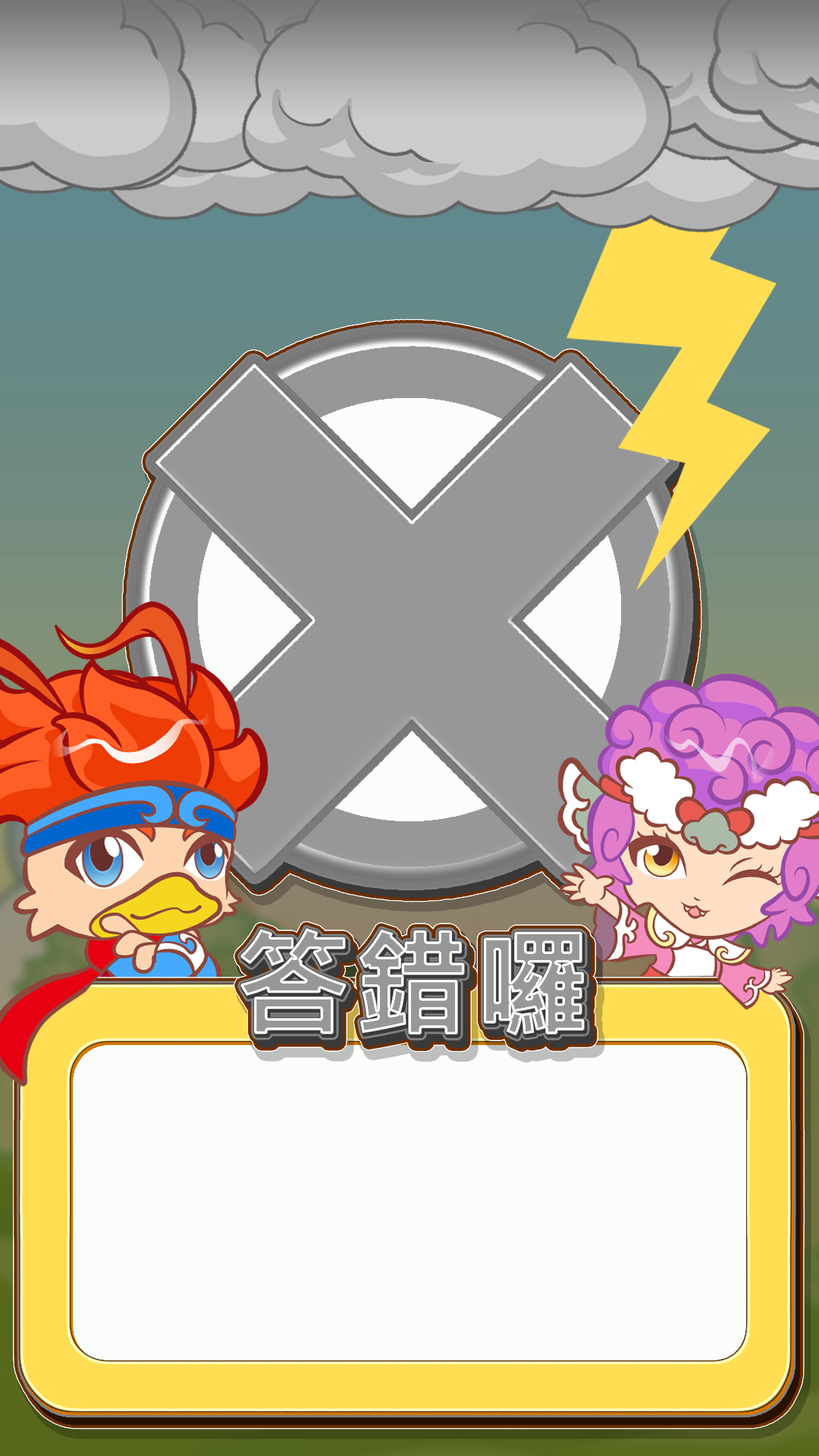
<style>
.page{position:relative;width:819px;height:1456px}
.page>*{position:absolute;margin:0}
.t1{font:115.9px "MicrosoftJhengHeiBold";color:#979797;font-weight:bold}
</style>
<div class="page">
<p class="t1" style="left:240px;top:927px;width:345px;height:109px">答錯囉</p>
<p class="t1" style="left:240px;top:927px;width:345px;height:109px">答錯囉</p>
</div>
